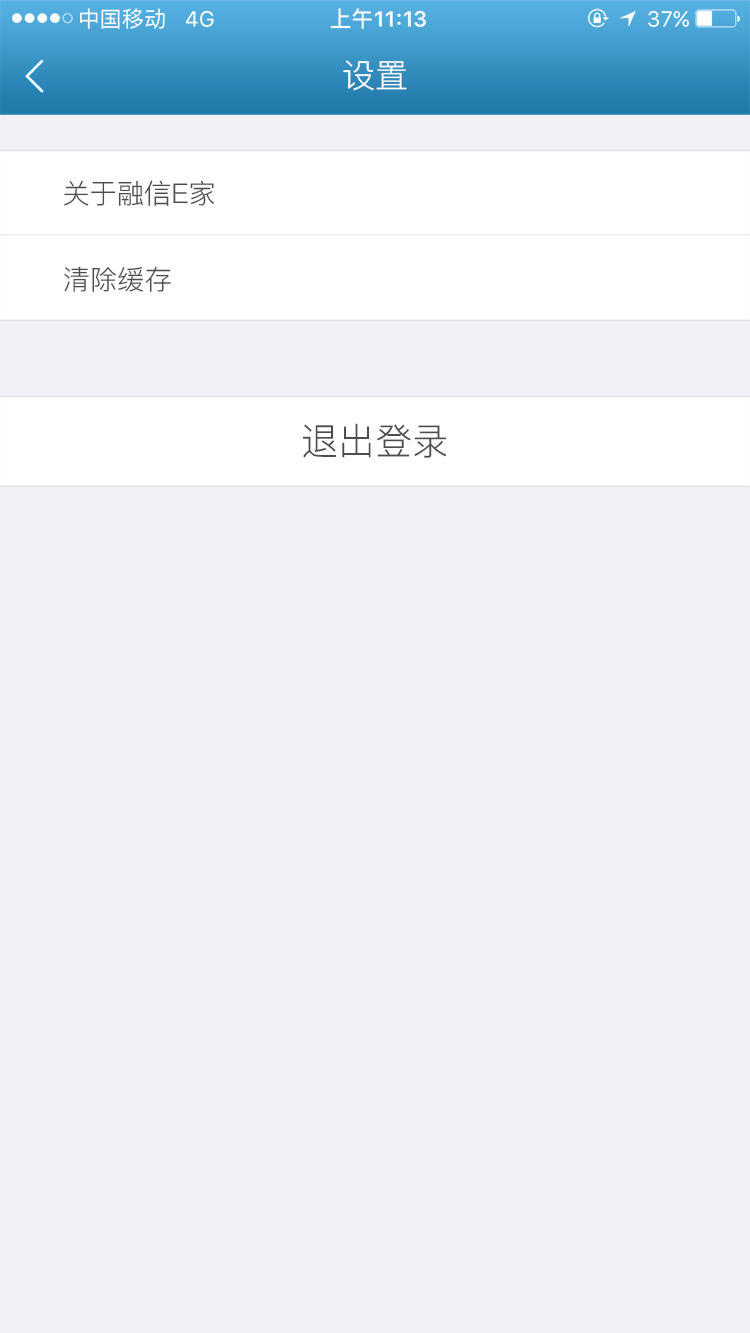
<style>
.page{position:relative;width:750px;height:1333px;background:#f0f0f6}
.page>*{position:absolute;margin:0}
.t1{font:33.3px "PingFang-SC-Regular";color:#ffffff}
.t2{font:27.2px "PingFang-SC-Regular";color:#4d4d4d}
.t3{font:37px "PingFang-SC-Regular";color:#4d4d4d}
</style>
<div class="page">
<p class="t1" style="left:343px;top:60px;width:64px;height:31px">设置</p>
<p class="t2" style="left:64px;top:180px;width:150px;height:26px">关于融信E家</p>
<p class="t2" style="left:64px;top:266px;width:107px;height:26px">清除缓存</p>
<p class="t3" style="left:303px;top:423px;width:144px;height:35px">退出登录</p>
</div>
